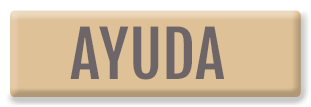
<style>
.page{position:relative;width:311px;height:107px;background:#dfc197}
.page>*{position:absolute;margin:0}
.t1{font:63px "FjallaOne-Regular";color:#6e6568;text-transform:uppercase}
</style>
<div class="page">
<p class="t1" style="left:70px;top:26px;width:155px;height:54px">ayuda</p>
</div>
